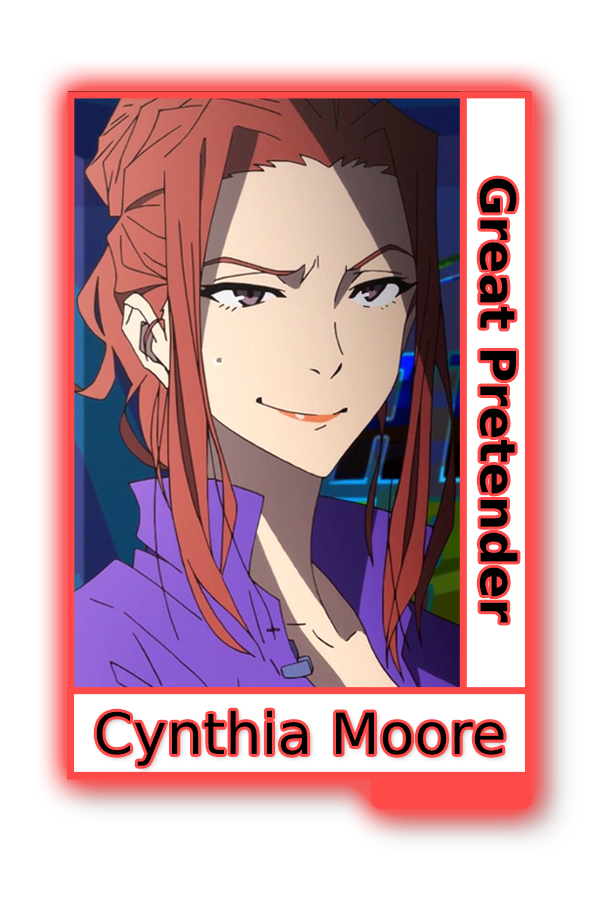
<style>
.page{position:relative;width:600px;height:900px;background:#ffffff}
.page>*{position:absolute;margin:0}
.t1{font:48.8px "MADETOMMY-Bold";color:#000000}
.t2{font:57px "CoolveticaRg-Regular";color:#000000}
</style>
<div class="page">
<p class="t1" style="left:479px;top:178px;width:39px;height:445px;rotate:90deg">Great Pretender</p>
<p class="t2" style="left:96px;top:710px;width:408px;height:56px">Cynthia Moore</p>
</div>
